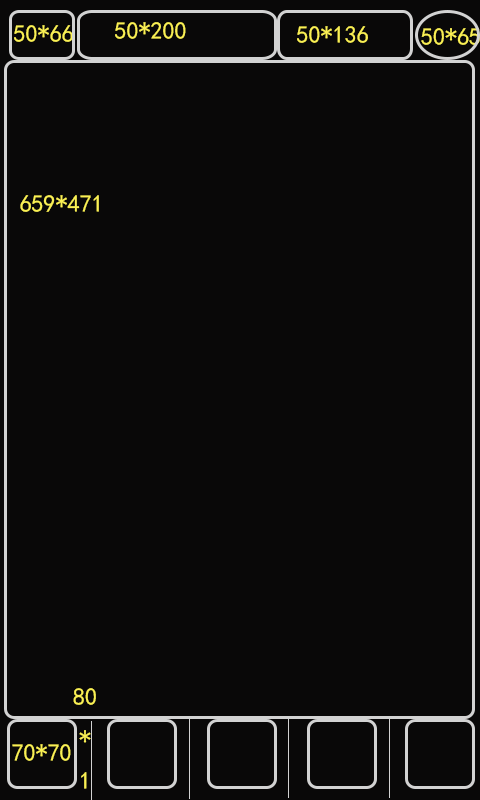
<style>
.page{position:relative;width:480px;height:800px;background:#090808}
.page>*{position:absolute;margin:0}
.t1{font:24px "SimHei";color:#faf054}
</style>
<div class="page">
<p class="t1" style="left:14px;top:25px;width:59px;height:17px">50*66</p>
<p class="t1" style="left:115px;top:22px;width:71px;height:17px">50*200</p>
<p class="t1" style="left:297px;top:26px;width:71px;height:17px">50*136</p>
<p class="t1" style="left:421px;top:28px;width:59px;height:17px">50*65</p>
<p class="t1" style="left:20px;top:195px;width:79px;height:17px">659*471</p>
<p class="t1" style="left:73px;top:688px;width:23px;height:101px;text-align:center">80<br>*<br>1</p>
<p class="t1" style="left:12px;top:744px;width:59px;height:17px">70*70</p>
</div>
